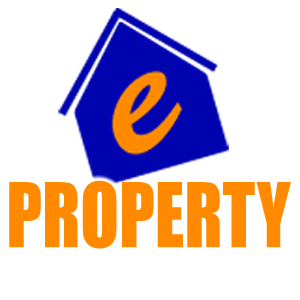
<style>
.page{position:relative;width:300px;height:300px;background:#ffffff}
.page>*{position:absolute;margin:0}
.t1{font:82.4px "Impact";color:#ff8a00;scale:0.86 1}
</style>
<div class="page">
<p class="t1" style="left:9px;top:180px;width:282px;height:69px">PROPERTY</p>
</div>
